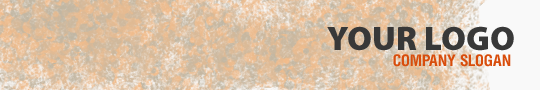
<style>
.page{position:relative;width:540px;height:90px}
.page>*{position:absolute;margin:0}
.t1{font:34px "MyriadPro-Black";color:#383838;text-transform:uppercase}
.t2{font:16px "HeliosCondBold";color:#d84d0c;text-transform:uppercase}
</style>
<div class="page">
<p class="t1" style="left:327px;top:26px;width:187px;height:25px">YOUR LOGO</p>
<p class="t2" style="left:393px;top:54px;width:118px;height:13px">company slogan</p>
</div>
